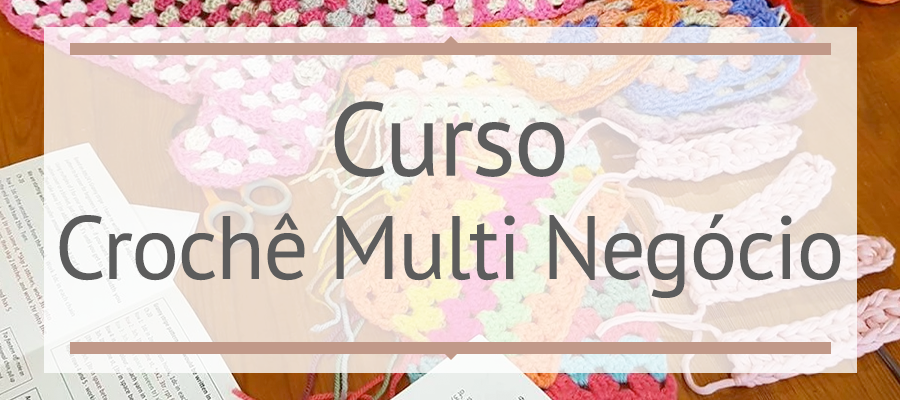
<style>
.page{position:relative;width:900px;height:400px}
.page>*{position:absolute;margin:0}
.t1{font:104.2px "PTSans-Regular";letter-spacing:-0.02em;color:#5d5d5d}
.t2{font:89.6px "PTSans-Regular";letter-spacing:-0.02em;color:#5c5c5c}
</style>
<div class="page">
<p class="t1" style="left:334px;top:101px;width:231px;height:76px">Curso</p>
<p class="t2" style="left:59px;top:213px;width:782px;height:85px">Crochê Multi Negócio</p>
</div>
